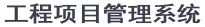
<style>
.page{position:relative;width:205px;height:27px;background:#ffffff}
.page>*{position:absolute;margin:0}
.t1{font:21.2px "SimHei";color:#3b3e4a;font-weight:bold;scale:1.14 1}
</style>
<div class="page">
<p class="t1" style="left:4px;top:3px;width:197px;height:21px">工程项目管理系统</p>
</div>
